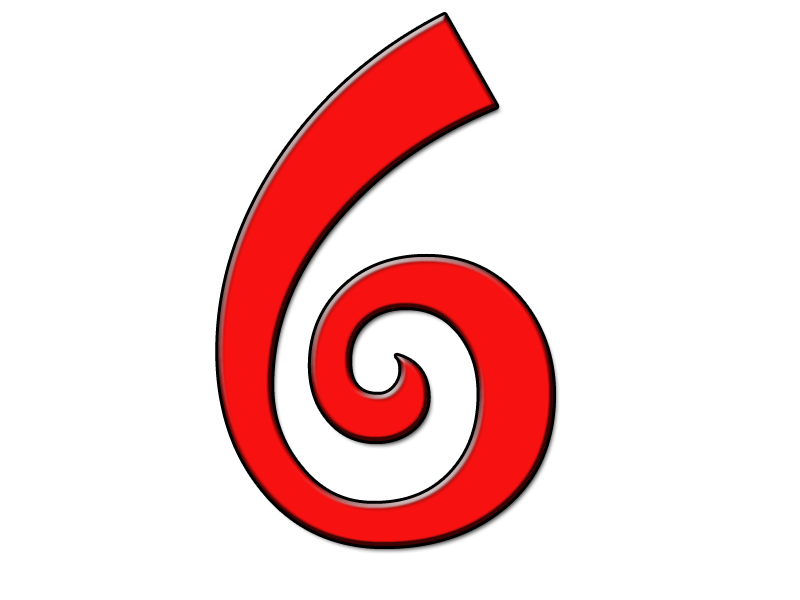
<style>
.page{position:relative;width:800px;height:600px;background:#ffffff}
.page>*{position:absolute;margin:0}
.t1{font:600px "Jokerman-Regular";color:#f81111}
</style>
<div class="page">
<p class="t1" style="left:218px;top:14px;width:335px;height:532px">6</p>
</div>
